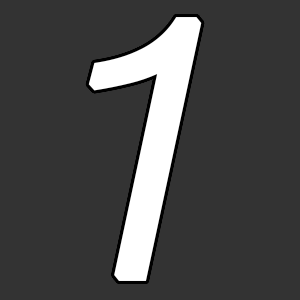
<style>
.page{position:relative;width:300px;height:300px;background:#333333}
.page>*{position:absolute;margin:0}
.t1{font:363px "HelveticaNeue-LightItalic";letter-spacing:0.12em;color:#ffffff;font-weight:bold}
</style>
<div class="page">
<p class="t1" style="left:88px;top:17px;width:114px;height:264px">1</p>
</div>
